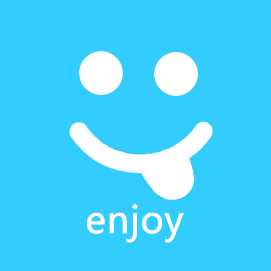
<style>
.page{position:relative;width:271px;height:271px;background:#32ccfe}
.page>*{position:absolute;margin:0}
.t1{font:36px "MicrosoftYaHei";color:#ffffff;font-weight:bold}
</style>
<div class="page">
<p class="t1" style="left:87px;top:204px;width:97px;height:39px">enjoy</p>
</div>
